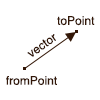
<style>
.page{position:relative;width:100px;height:100px;background:#ffffff}
.page>*{position:absolute;margin:0}
.t1{font:12px "Helvetica";color:#331707}
</style>
<div class="page">
<p class="t1" style="left:57px;top:16px;width:38px;height:10px">toPoint</p>
<p class="t1" style="left:27px;top:34px;width:29px;height:23px;rotate:-35deg">vector</p>
<p class="t1" style="left:6px;top:76px;width:51px;height:9px">fromPoint</p>
</div>
